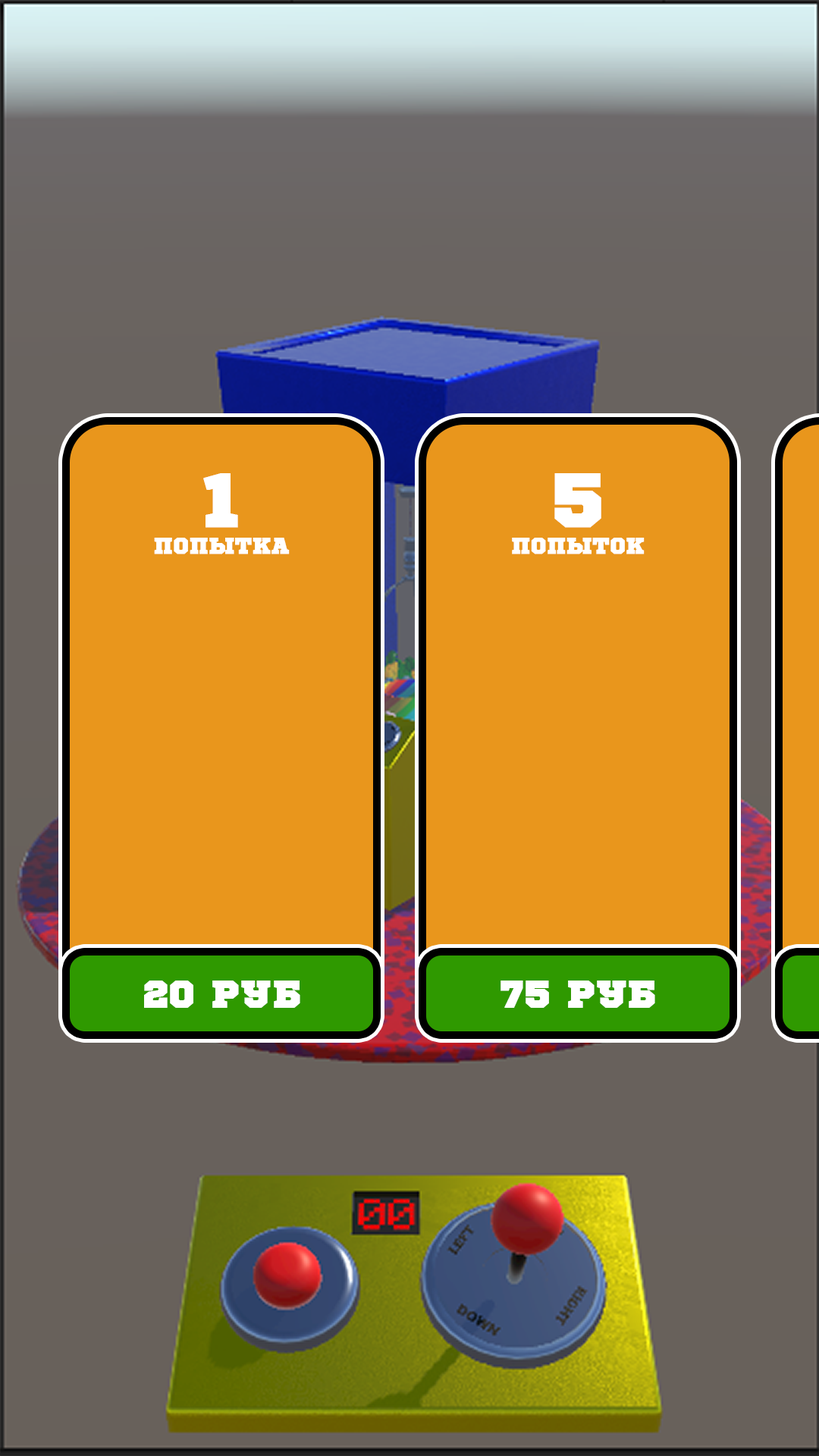
<style>
.page{position:relative;width:819px;height:1456px;background:#e9961c}
.page>*{position:absolute;margin:0}
.t1{font:22.7px "SportsWorld";color:#ffffff;text-transform:uppercase;font-weight:bold}
.t2{font:75.8px "SportsWorld";color:#ffffff;text-transform:uppercase;font-weight:bold}
.t3{font:37.9px "SportsWorld";color:#ffffff;text-transform:uppercase;font-weight:bold}
</style>
<div class="page">
<p class="t1" style="left:154px;top:473px;width:136px;height:81px;text-align:center"><span class="t2">1<br></span>попытка</p>
<p class="t1" style="left:512px;top:473px;width:133px;height:81px;text-align:center"><span class="t2">5<br></span>попыток</p>
<p class="t3" style="left:144px;top:981px;width:156px;height:27px">20 руб</p>
<p class="t3" style="left:500px;top:981px;width:155px;height:27px">75 руб</p>
</div>
